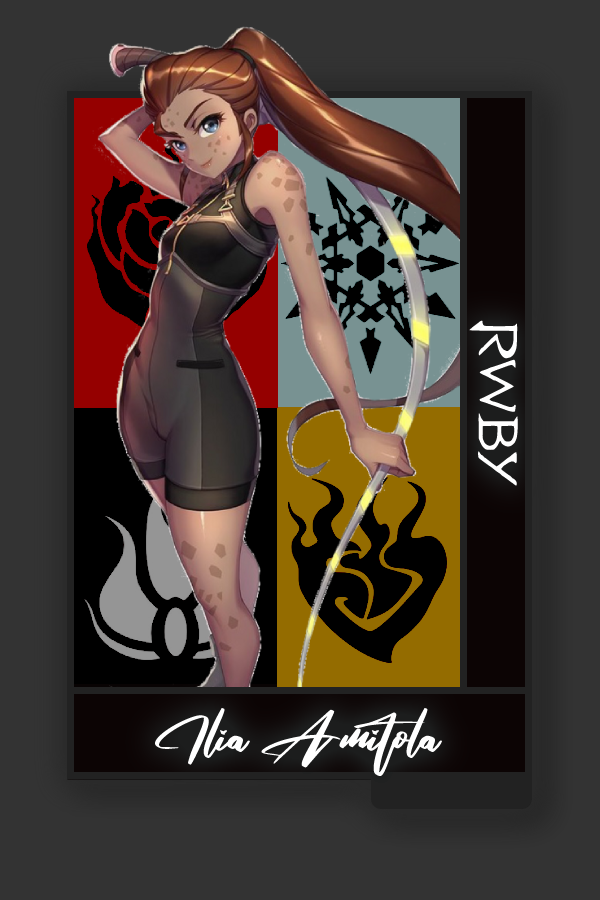
<style>
.page{position:relative;width:600px;height:900px;background:#333333}
.page>*{position:absolute;margin:0}
.t1{font:61.3px "RWBY_Style";color:#ffffff;scale:1.25 1}
.t2{font:75px "RosegaFREE";color:#ffffff}
</style>
<div class="page">
<p class="t1" style="left:469px;top:320px;width:49px;height:166px;rotate:90deg">RWBY</p>
<p class="t2" style="left:152px;top:707px;width:291px;height:70px">Ilia Amitola</p>
</div>
